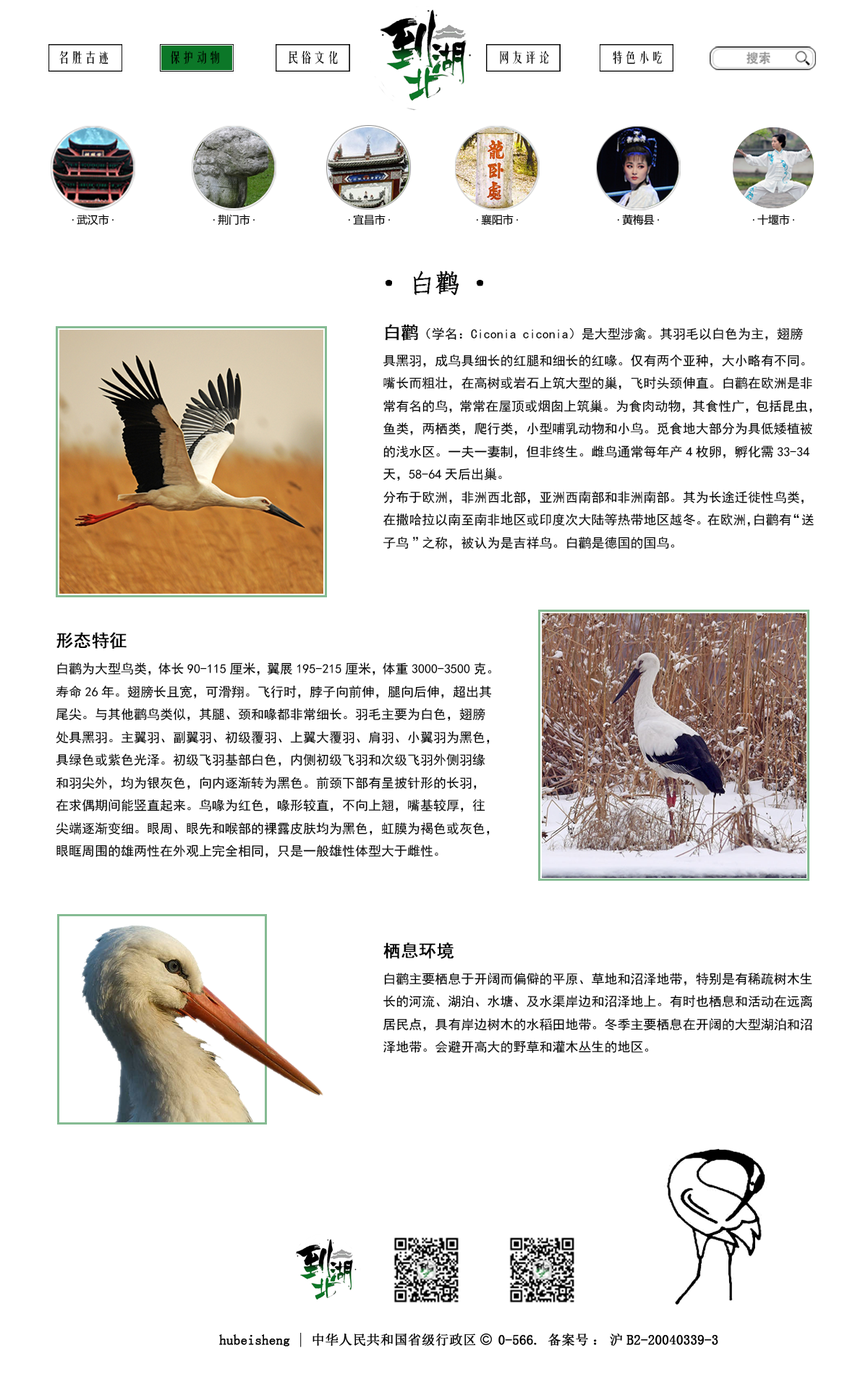
<style>
.page{position:relative;width:868px;height:1374px;background:#ffffff}
.page>*{position:absolute;margin:0}
.t1{font:13.3px "FZYTK--GBK1-0";color:#000000}
.t2{font:26px "·ÂËÎ";color:#000000;font-weight:bold}
.t3{font:13px "SimHei";color:#000000}
.t4{font:17.4px "SimHei";color:#000000;font-weight:bold}
</style>
<div class="page">
<p class="t1" style="left:59px;top:51px;width:49px;height:13px">名胜古迹</p>
<p class="t1" style="left:171px;top:51px;width:48px;height:13px">保护动物</p>
<p class="t1" style="left:289px;top:51px;width:49px;height:13px">民俗文化</p>
<p class="t1" style="left:500px;top:51px;width:49px;height:13px">网友评论</p>
<p class="t1" style="left:613px;top:51px;width:49px;height:13px">特色小吃</p>
<p class="t2" style="left:385px;top:270px;width:98px;height:25px">·白鹳·</p>
<p class="t3" style="left:383px;top:324px;width:431px;height:226px"><span class="t4">白鹳</span>（学名：Ciconia ciconia）是大型涉禽。其羽毛以白色为主，翅膀具黑羽，成鸟具细长的红腿和细长的红喙。仅有两个亚种，大小略有不同。嘴长而粗壮，在高树或岩石上筑大型的巢，飞时头颈伸直。白鹳在欧洲是非常有名的鸟，常常在屋顶或烟囱上筑巢。为食肉动物，其食性广，包括昆虫，鱼类，两栖类，爬行类，小型哺乳动物和小鸟。觅食地大部分为具低矮植被的浅水区。一夫一妻制，但非终生。雌鸟通常每年产4枚卵，孵化需33-34天，58-64天后出巢。<br>分布于欧洲，非洲西北部，亚洲西南部和非洲南部。其为长途迁徙性鸟类，在撒哈拉以南至南非地区或印度次大陆等热带地区越冬。在欧洲，白鹳有“送子鸟”之称，被认为是吉祥鸟。白鹳是德国的国鸟。</p>
<p class="t3" style="left:56px;top:632px;width:436px;height:226px"><span class="t4">形态特征<br></span>白鹳为大型鸟类，体长90-115厘米，翼展195-215厘米，体重3000-3500克。寿命26年。翅膀长且宽，可滑翔。飞行时，脖子向前伸，腿向后伸，超出其尾尖。与其他鹳鸟类似，其腿、颈和喙都非常细长。羽毛主要为白色，翅膀处具黑羽。主翼羽、副翼羽、初级覆羽、上翼大覆羽、肩羽、小翼羽为黑色，具绿色或紫色光泽。初级飞羽基部白色，内侧初级飞羽和次级飞羽外侧羽缘和羽尖外，均为银灰色，向内逐渐转为黑色。前颈下部有呈披针形的长羽，在求偶期间能竖直起来。鸟喙为红色，喙形较直，不向上翘，嘴基较厚，往尖端逐渐变细。眼周、眼先和喉部的裸露皮肤均为黑色，虹膜为褐色或灰色，眼眶周围的雄两性在外观上完全相同，只是一般雄性体型大于雌性。</p>
<p class="t3" style="left:383px;top:942px;width:429px;height:112px"><span class="t4">栖息环境<br></span>白鹳主要栖息于开阔而偏僻的平原、草地和沼泽地带，特别是有稀疏树木生长的河流、湖泊、水塘、及水渠岸边和沼泽地上。有时也栖息和活动在远离居民点，具有岸边树木的水稻田地带。冬季主要栖息在开阔的大型湖泊和沼泽地带。会避开高大的野草和灌木丛生的地区。</p>
</div>
